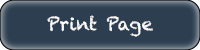
<style>
.page{position:relative;width:200px;height:50px;background:#2c3e50}
.page>*{position:absolute;margin:0}
.t1{font:18px "Chalkduster";color:#fffefe}
.t2{font:12px "Chalkduster";color:#fffefe}
</style>
<div class="page">
<p class="t1" style="left:47px;top:15px;width:106px;height:22px"><span class="t2"><br></span>Print Page</p>
</div>
